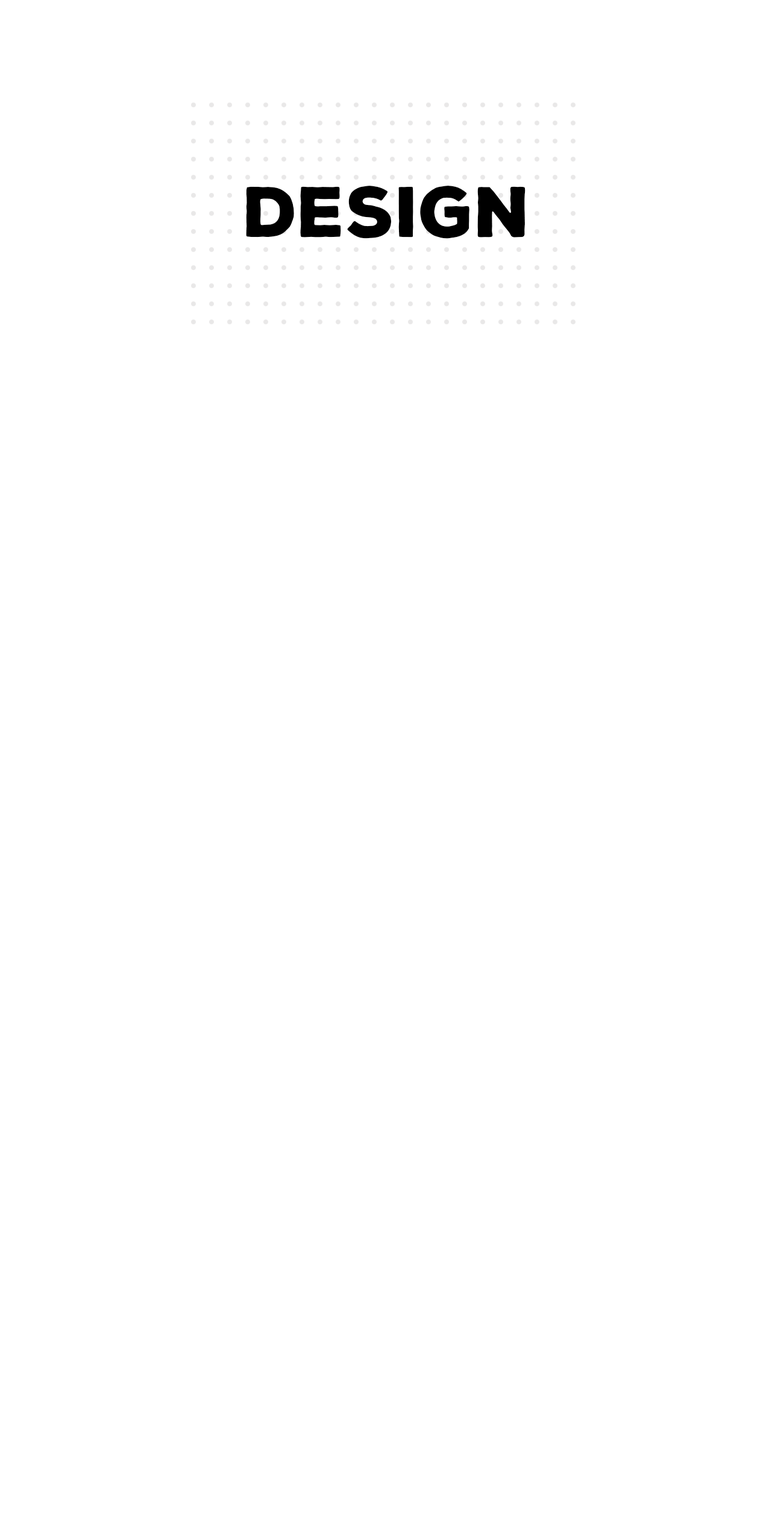
<style>
.page{position:relative;width:775px;height:1539px;background:#ffffff}
.page>*{position:absolute;margin:0}
.t1{font:69.1px "NexaRustSans-Black";color:#000000}
</style>
<div class="page">
<p class="t1" style="left:246px;top:186px;width:280px;height:53px">DESIGN</p>
</div>
